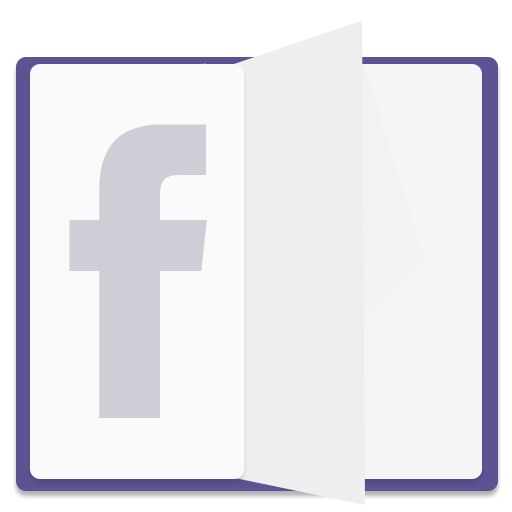
<style>
.page{position:relative;width:512px;height:512px;background:#fafafa}
.page>*{position:absolute;margin:0}
.t1{font:372px "FacebookLetterFaces";color:#cfced7}
</style>
<div class="page">
<p class="t1" style="left:69px;top:124px;width:138px;height:294px">f</p>
</div>
